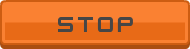
<style>
.page{position:relative;width:190px;height:49px;background:#fa8132}
.page>*{position:absolute;margin:0}
.t1{font:24px "KenVector-Future";color:#464646}
</style>
<div class="page">
<p class="t1" style="left:58px;top:17px;width:75px;height:15px">Stop</p>
</div>
